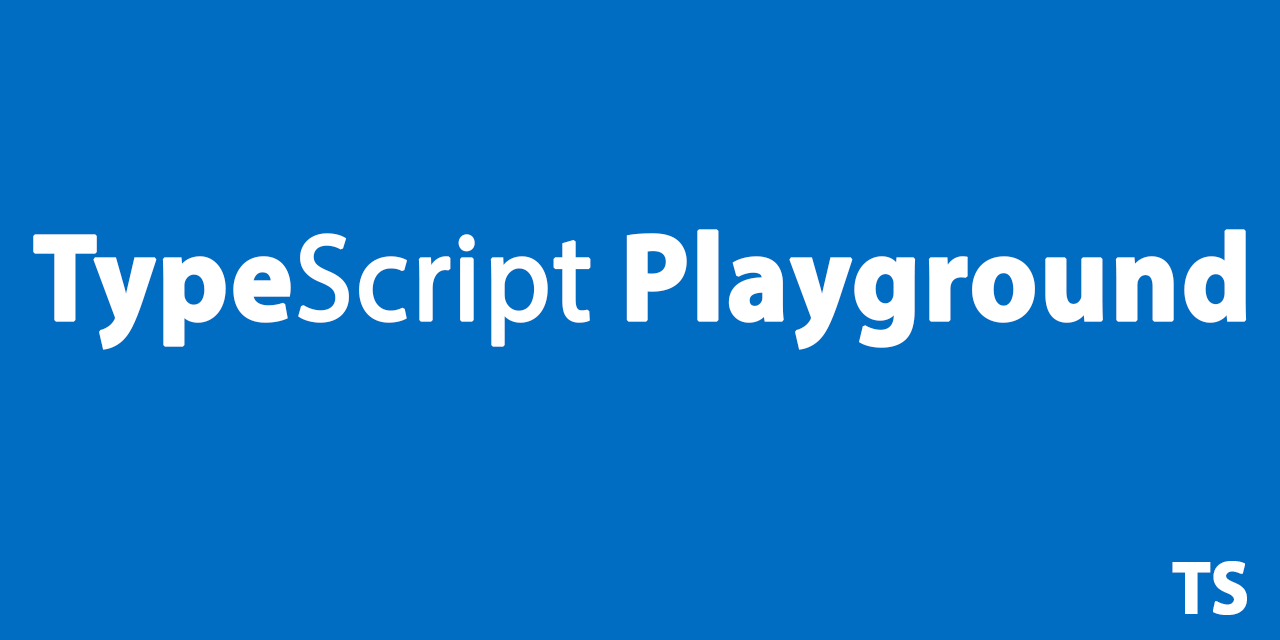
<style>
.page{position:relative;width:1280px;height:640px;background:#006dc3}
.page>*{position:absolute;margin:0}
.t1{font:125px "MyriadPro-Bold";color:#ffffff;font-weight:bold;scale:0.93 1}
.t2{font:125px "MyriadPro-Regular";color:#ffffff;font-weight:bold;scale:0.93 1}
.t3{font:75px "MyriadPro-Bold";color:#feffff;font-weight:bold;scale:0.93 1}
</style>
<div class="page">
<p class="t1" style="left:33px;top:229px;width:1214px;height:121px">Type<span class="t2">Script</span> Playground</p>
<p class="t3" style="left:1172px;top:561px;width:75px;height:54px">TS</p>
</div>
